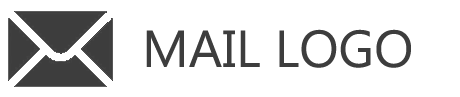
<style>
.page{position:relative;width:460px;height:97px;background:#ffffff}
.page>*{position:absolute;margin:0}
.t1{font:52px "SegoeUI";color:#3e3c3c}
</style>
<div class="page">
<p class="t1" style="left:146px;top:29px;width:265px;height:39px">MAIL LOGO</p>
</div>
